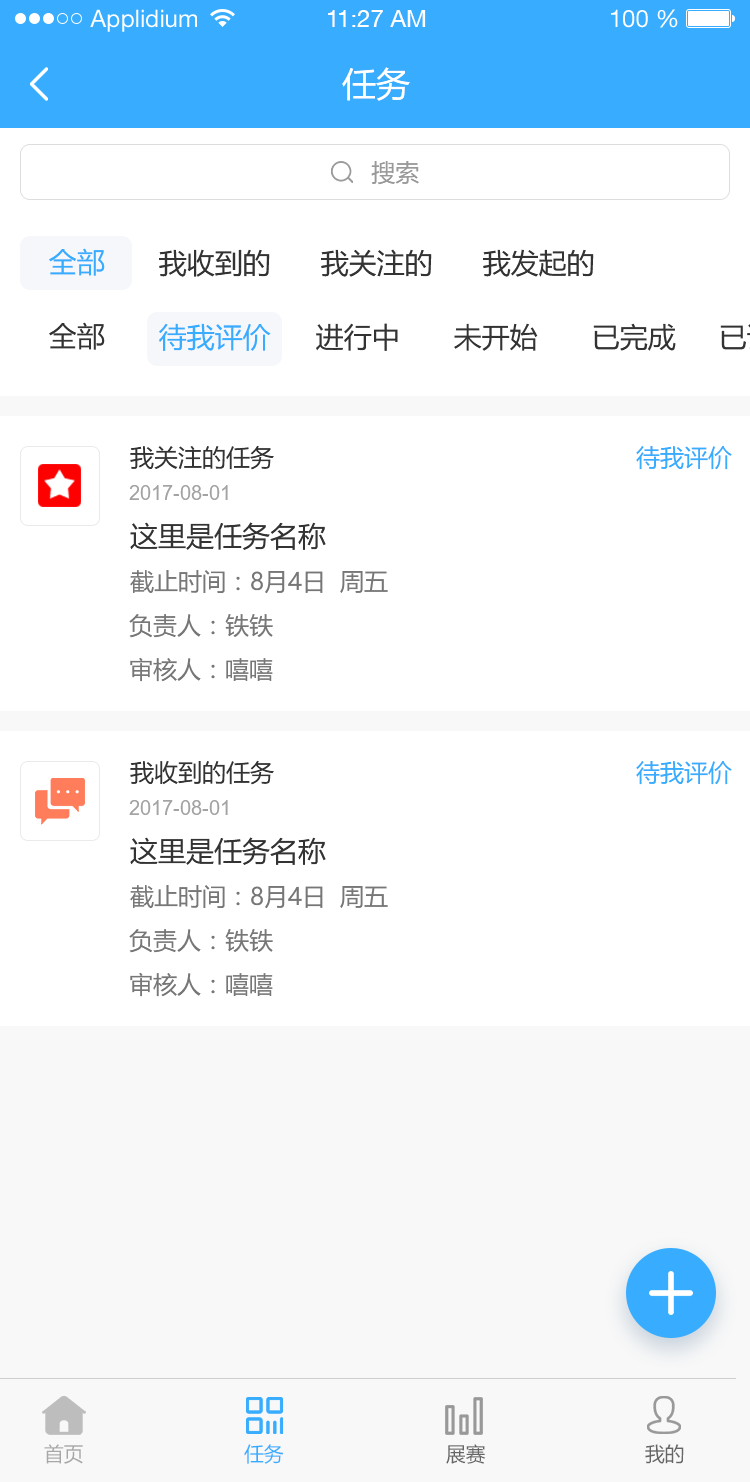
<style>
.page{position:relative;width:750px;height:1482px;background:#ffffff}
.page>*{position:absolute;margin:0}
.t1{font:24px "HelveticaNeueLTStd-Roman";color:#ffffff}
.t2{font:24px "HelveticaNeueCE-Roman";color:#ffffff}
.t3{font:34px "MicrosoftYaHei";color:#ffffff}
.t4{font:24px "MicrosoftYaHei";color:#999999}
.t5{font:28px "MicrosoftYaHei";color:#38adff}
.t6{font:28px "MicrosoftYaHei";color:#333333}
.t7{font:24px "MicrosoftYaHei";color:#333333}
.t8{font:24px "MicrosoftYaHei";color:#38adff}
.t9{font:20px "ArialMT";color:#a3a3a3}
.t10{font:24px "MicrosoftYaHei";color:#777777}
.t11{font:20px "MicrosoftYaHei";color:#a7a7a7;text-transform:uppercase}
.t12{font:20px "MicrosoftYaHei";color:#38adff;text-transform:uppercase}
.t13{font:20px "MicrosoftYaHei";color:#666666;text-transform:uppercase}
</style>
<div class="page">
<p class="t1" style="left:90px;top:9px;width:107px;height:23px">Applidium</p>
<p class="t2" style="left:328px;top:10px;width:98px;height:17px">11:27 AM</p>
<p class="t1" style="left:611px;top:9px;width:67px;height:19px">100 %</p>
<p class="t3" style="left:342px;top:67px;width:68px;height:34px">任务</p>
<p class="t4" style="left:371px;top:161px;width:48px;height:24px">搜索</p>
<p class="t5" style="left:49px;top:248px;width:56px;height:28px">全部</p>
<p class="t6" style="left:159px;top:249px;width:111px;height:28px">我收到的</p>
<p class="t6" style="left:321px;top:249px;width:111px;height:28px">我关注的</p>
<p class="t6" style="left:483px;top:249px;width:111px;height:28px">我发起的</p>
<p class="t6" style="left:49px;top:322px;width:56px;height:28px">全部</p>
<p class="t5" style="left:159px;top:323px;width:112px;height:28px">待我评价</p>
<p class="t6" style="left:316px;top:323px;width:82px;height:28px">进行中</p>
<p class="t6" style="left:454px;top:323px;width:84px;height:28px">未开始</p>
<p class="t6" style="left:593px;top:323px;width:83px;height:28px">已完成</p>
<p class="t7" style="left:130px;top:445px;width:144px;height:25px">我关注的任务</p>
<p class="t8" style="left:636px;top:446px;width:96px;height:24px">待我评价</p>
<p class="t9" style="left:129px;top:485px;width:99px;height:15px">2017-08-01</p>
<p class="t6" style="left:130px;top:522px;width:196px;height:28px">这里是任务名称</p>
<p class="t10" style="left:130px;top:570px;width:258px;height:24px">截止时间：8月4日  周五</p>
<p class="t10" style="left:129px;top:614px;width:144px;height:24px">负责人：铁铁</p>
<p class="t10" style="left:130px;top:657px;width:143px;height:25px">审核人：嘻嘻</p>
<p class="t7" style="left:130px;top:760px;width:144px;height:25px">我收到的任务</p>
<p class="t8" style="left:636px;top:761px;width:96px;height:24px">待我评价</p>
<p class="t9" style="left:129px;top:800px;width:99px;height:15px">2017-08-01</p>
<p class="t6" style="left:130px;top:837px;width:196px;height:28px">这里是任务名称</p>
<p class="t10" style="left:130px;top:885px;width:258px;height:24px">截止时间：8月4日  周五</p>
<p class="t10" style="left:129px;top:929px;width:144px;height:24px">负责人：铁铁</p>
<p class="t10" style="left:130px;top:972px;width:143px;height:25px">审核人：嘻嘻</p>
<p class="t11" style="left:44px;top:1444px;width:39px;height:20px">首页</p>
<p class="t12" style="left:244px;top:1444px;width:40px;height:20px">任务</p>
<p class="t13" style="left:446px;top:1444px;width:40px;height:20px">展赛</p>
<p class="t13" style="left:645px;top:1444px;width:39px;height:20px">我的</p>
</div>
